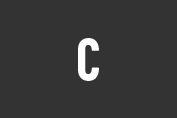
<style>
.page{position:relative;width:177px;height:118px;background:#333333}
.page>*{position:absolute;margin:0}
.t1{font:58.3px "Phenomena-ExtraBold";color:#fffefe}
</style>
<div class="page">
<p class="t1" style="left:78px;top:38px;width:21px;height:43px">C</p>
</div>
